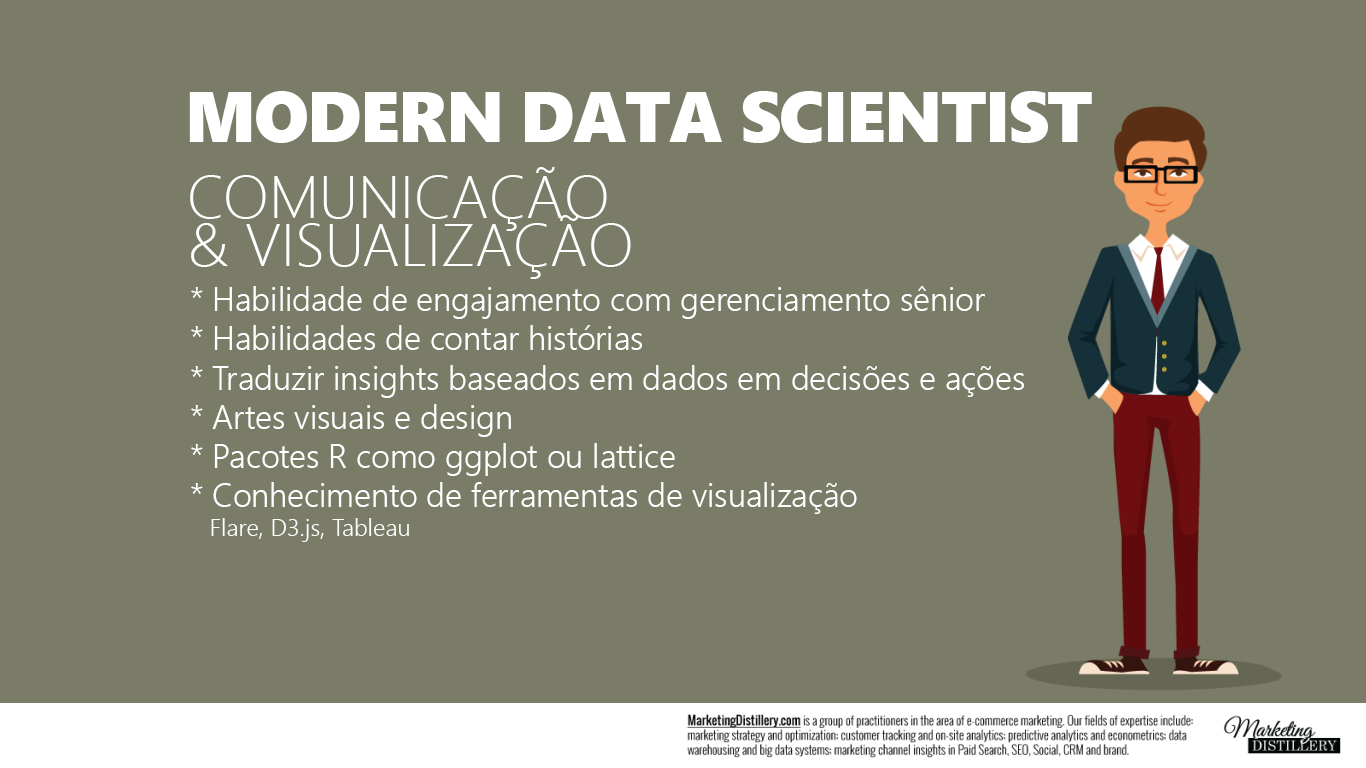
<style>
.page{position:relative;width:1366px;height:768px;background:#7a7c67}
.page>*{position:absolute;margin:0}
.t1{font:72px "SegoeUIBlack";letter-spacing:-0.025em;color:#ffffff}
.t2{font:60px/48px "SegoeUI-Light";color:#ffffff}
.t3{font:32.7px "SegoeUI-Semilight";color:#ffffff}
.t4{font:24px "SegoeUI-Semilight";color:#ffffff}
</style>
<div class="page">
<p class="t1" style="left:189px;top:91px;width:903px;height:52px">MODERN DATA SCIENTIST</p>
<p class="t2" style="left:190px;top:167px;width:441px;height:112px">COMUNICAÇÃO<br>&amp; VISUALIZAÇÃO</p>
<p class="t3" style="left:191px;top:286px;width:833px;height:256px">* Habilidade de engajamento com gerenciamento sênior<br>* Habilidades de contar histórias<br>* Traduzir insights baseados em dados em decisões e ações<br>* Artes visuais e design<br>* Pacotes R como ggplot ou lattice<br>* Conhecimento de ferramentas de visualização<br><span class="t4">   Flare, D3.js, Tableau</span></p>
</div>
